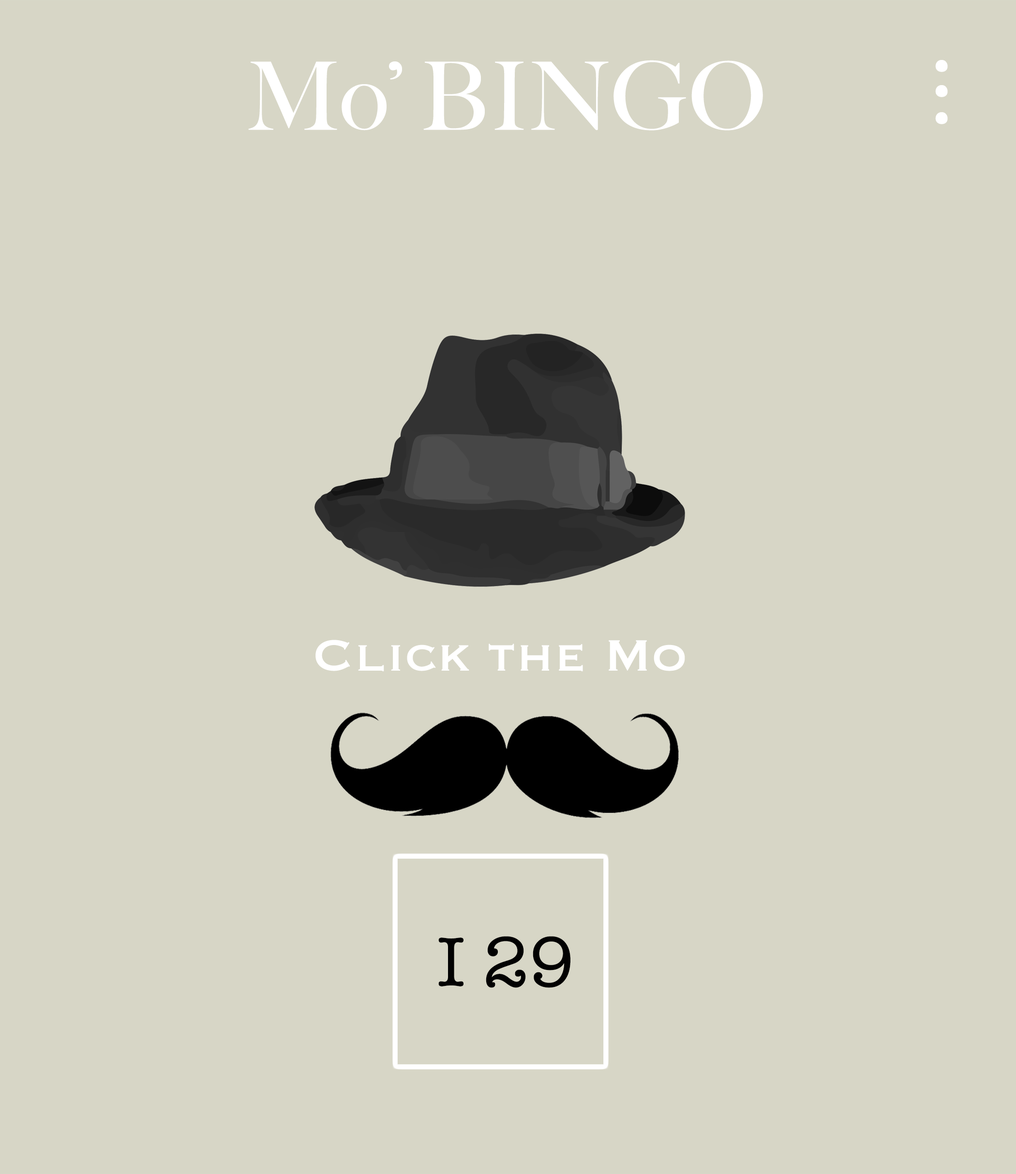
<style>
.page{position:relative;width:1016px;height:1174px;background:#d7d6c6}
.page>*{position:absolute;margin:0}
.t1{font:94.5px "BigCaslon-Medium";color:#ffffff}
.t2{font:100.3px "BigCaslon-Medium";color:#ffffff}
.t3{font:57.6px "Copperplate";color:#ffffff}
.t4{font:71.9px "AmericanTypewriter";color:#020202}
</style>
<div class="page">
<p class="t1" style="left:248px;top:60px;width:515px;height:71px">Mo’ BINGO</p>
<p class="t2" style="left:935px;top:60px;width:12px;height:12px">.</p>
<p class="t2" style="left:935px;top:85px;width:12px;height:12px">.</p>
<p class="t2" style="left:935px;top:112px;width:12px;height:12px">.</p>
<p class="t3" style="left:315px;top:640px;width:370px;height:32px">Click the Mo</p>
<p class="t4" style="left:438px;top:936px;width:132px;height:52px">I 29</p>
</div>
